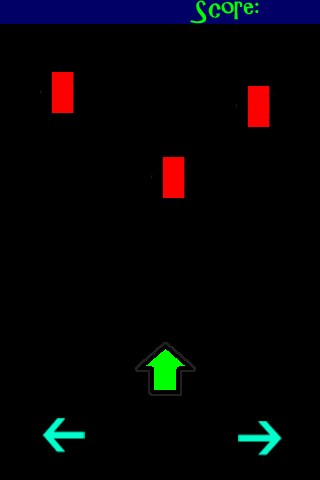
<style>
.page{position:relative;width:320px;height:480px;background:#000000}
.page>*{position:absolute;margin:0}
.t1{font:25px "ARCHRISTY";color:#00ff00}
</style>
<div class="page">
<p class="t1" style="left:190px;top:0px;width:69px;height:24px">Score:</p>
</div>
